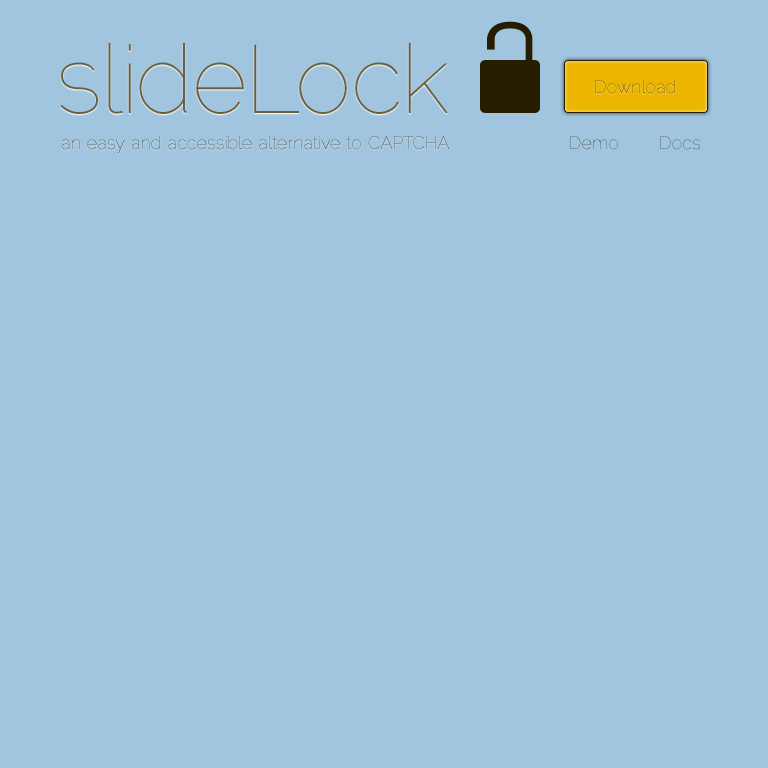
<style>
.page{position:relative;width:768px;height:768px;background:#a1c5df}
.page>*{position:absolute;margin:0}
.t1{font:96px "Raleway-Thin";color:#695f3f}
.t2{font:18px "Raleway-Thin"}
</style>
<div class="page">
<p class="t1" style="left:60px;top:43px;width:388px;height:71px">slideLock</p>
<p class="t2" style="left:595px;top:79px;width:80px;height:15px">Download</p>
<p class="t2" style="left:62px;top:135px;width:388px;height:18px">an easy and accessible alternative to CAPTCHA</p>
<p class="t2" style="left:570px;top:136px;width:48px;height:14px">Demo</p>
<p class="t2" style="left:660px;top:136px;width:40px;height:14px">Docs</p>
</div>
